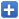
<style>
.page{position:relative;width:19px;height:19px;background:#ffffff}
.page>*{position:absolute;margin:0}
.t1{font:20px "Helvetica-Bold";color:#ffffff}
</style>
<div class="page">
<p class="t1" style="left:3px;top:4px;width:12px;height:12px">+</p>
</div>
